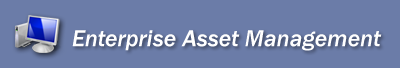
<style>
.page{position:relative;width:400px;height:68px;background:#6b7ca8}
.page>*{position:absolute;margin:0}
.t1{font:24px "FranklinGothic-MediumItalic";color:#ffffff}
</style>
<div class="page">
<p class="t1" style="left:72px;top:30px;width:310px;height:21px">Enterprise Asset Management</p>
</div>
